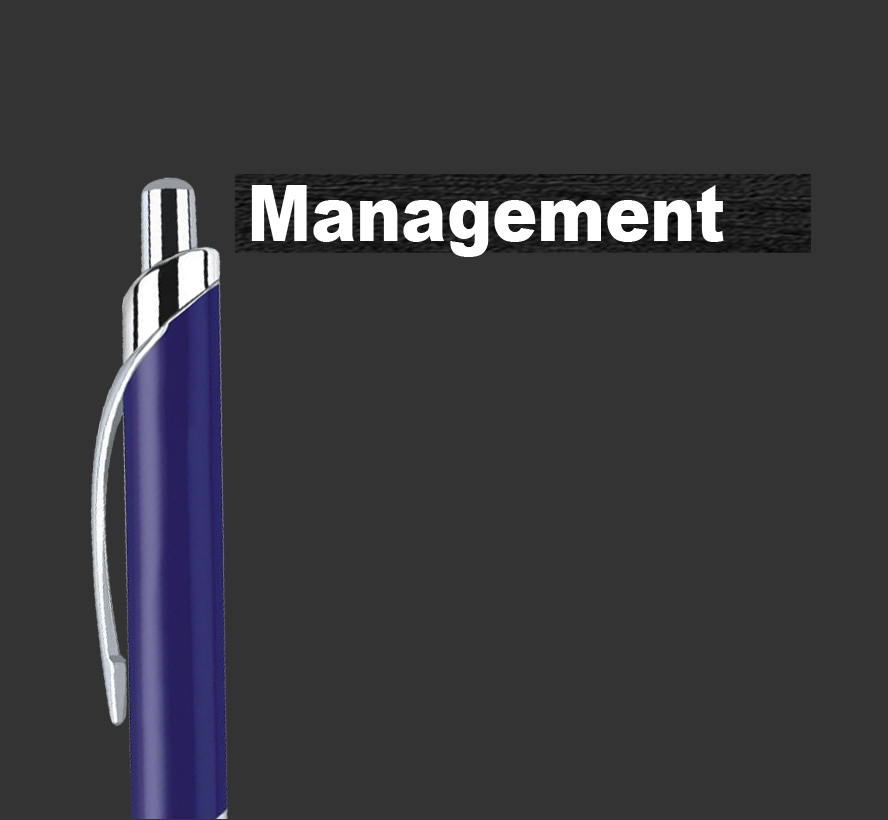
<style>
.page{position:relative;width:888px;height:820px;background:#333333}
.page>*{position:absolute;margin:0}
.t1{font:78.1px "Arial-Black";color:#fefefe;scale:0.87 1}
</style>
<div class="page">
<p class="t1" style="left:251px;top:185px;width:473px;height:72px">Management</p>
</div>
